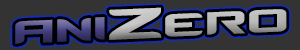
<style>
.page{position:relative;width:300px;height:50px;background:#333333}
.page>*{position:absolute;margin:0}
.t1{font:59.9px "Counter-StrikeRegular";scale:1.23 1}
</style>
<div class="page">
<p class="t1" style="left:15px;top:7px;width:272px;height:37px;rotate:-2deg">aniZero</p>
</div>
